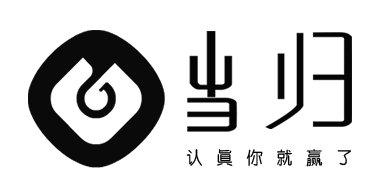
<style>
.page{position:relative;width:386px;height:193px;background:#ffffff}
.page>*{position:absolute;margin:0}
.t1{font:18px "CTZhongYuanSJ";letter-spacing:0.7em;color:#040404}
</style>
<div class="page">
<p class="t1" style="left:186px;top:149px;width:165px;height:18px">认真你就赢了</p>
</div>
